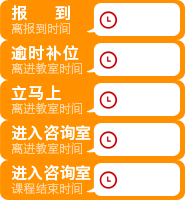
<style>
.page{position:relative;width:185px;height:200px;background:#ff9000}
.page>*{position:absolute;margin:0}
.t1{font:16px "HiraginoSansGB-W6";letter-spacing:0.08em;color:#ffffff}
.t2{font:12px "HiraginoSansGB-W3";color:#ffd399}
.t3{font:16px "HiraginoSansGB-W6";color:#ffffff}
</style>
<div class="page">
<p class="t1" style="left:11px;top:5px;width:59px;height:16px">报    到</p>
<p class="t2" style="left:11px;top:22px;width:59px;height:13px">离报到时间</p>
<p class="t1" style="left:11px;top:45px;width:68px;height:16px">逾时补位</p>
<p class="t2" style="left:11px;top:62px;width:71px;height:13px">离进教室时间</p>
<p class="t1" style="left:11px;top:85px;width:50px;height:16px">立马上</p>
<p class="t2" style="left:11px;top:102px;width:71px;height:13px">离进教室时间</p>
<p class="t3" style="left:11px;top:125px;width:80px;height:16px">进入咨询室</p>
<p class="t2" style="left:11px;top:142px;width:71px;height:13px">离进教室时间</p>
<p class="t3" style="left:11px;top:165px;width:80px;height:16px">进入咨询室</p>
<p class="t2" style="left:11px;top:182px;width:71px;height:13px">课程结束时间</p>
</div>
